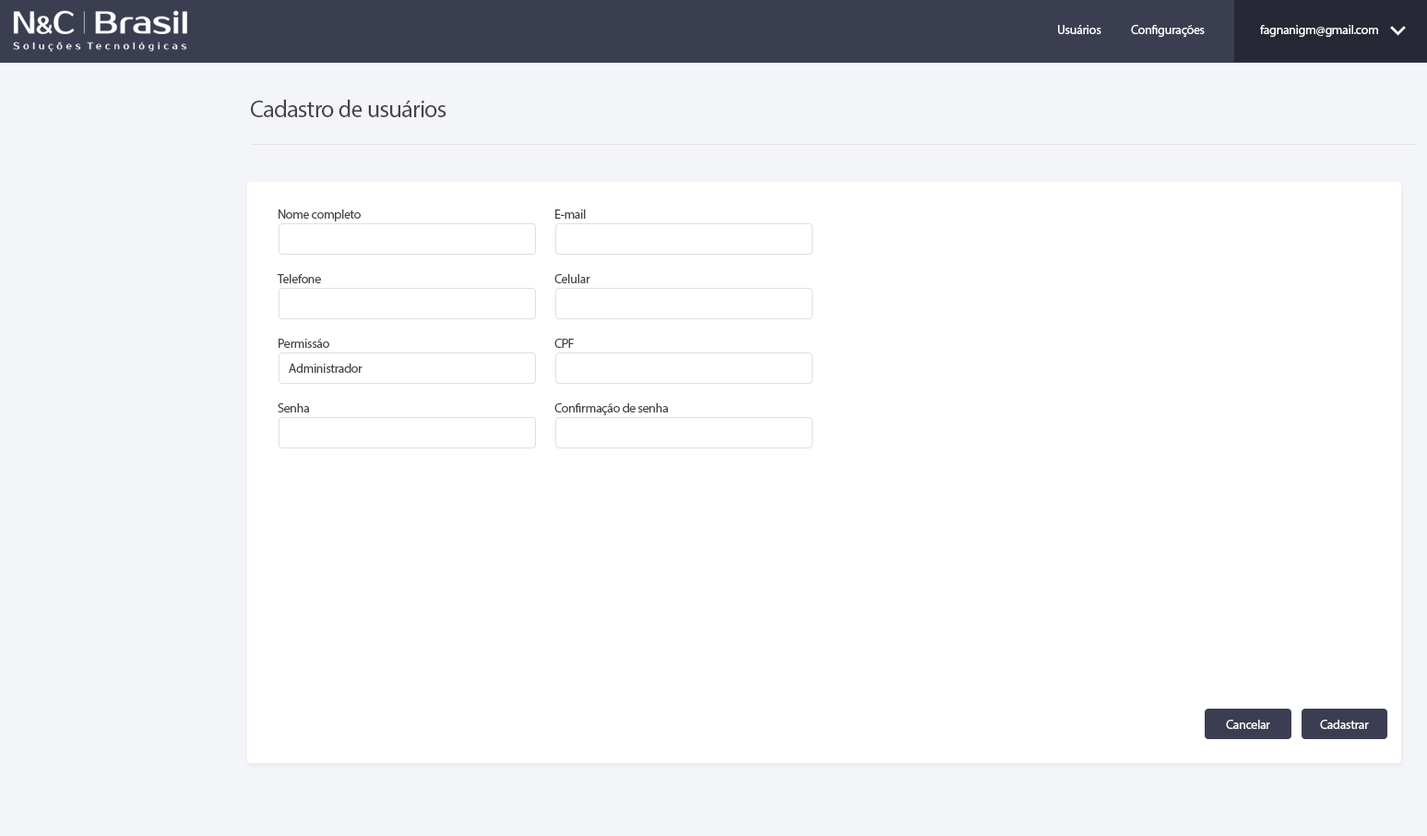
<style>
.page{position:relative;width:1427px;height:836px;background:#ffffff}
.page>*{position:absolute;margin:0}
.t1{font:12.9px "MyriadPro-Regular";letter-spacing:-0.025em;color:#ffffff}
.t2{font:24px "MyriadPro-Regular";letter-spacing:-0.025em;color:#454545}
.t3{font:12.9px "MyriadPro-Regular";letter-spacing:-0.025em;color:#454545}
</style>
<div class="page">
<p class="t1" style="left:1058px;top:25px;width:43px;height:9px">Usuários</p>
<p class="t1" style="left:1131px;top:25px;width:74px;height:12px">Configurações</p>
<p class="t1" style="left:1260px;top:25px;width:118px;height:12px">fagnanigm@gmail.com</p>
<p class="t2" style="left:251px;top:100px;width:195px;height:17px">Cadastro de usuários</p>
<p class="t3" style="left:279px;top:209px;width:82px;height:12px">Nome completo</p>
<p class="t3" style="left:555px;top:209px;width:31px;height:10px">E-mail</p>
<p class="t3" style="left:277px;top:274px;width:44px;height:9px">Telefone</p>
<p class="t3" style="left:554px;top:274px;width:36px;height:9px">Celular</p>
<p class="t3" style="left:279px;top:339px;width:50px;height:9px">Permissão</p>
<p class="t3" style="left:554px;top:339px;width:20px;height:9px">CPF</p>
<p class="t3" style="left:289px;top:363px;width:73px;height:10px">Administrador</p>
<p class="t3" style="left:278px;top:403px;width:32px;height:9px">Senha</p>
<p class="t3" style="left:554px;top:403px;width:115px;height:12px">Confirmação de senha</p>
<p class="t1" style="left:1226px;top:719px;width:44px;height:10px">Cancelar</p>
<p class="t1" style="left:1320px;top:719px;width:49px;height:10px">Cadastrar</p>
</div>
